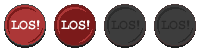
<style>
.page{position:relative;width:200px;height:50px;background:#ffffff}
.page>*{position:absolute;margin:0}
.t1{font:13.9px "CourierNewPS-BoldMT";color:#ffffff}
.t2{font:13.9px "CourierNewPS-BoldMT";letter-spacing:-0.14em;color:#ffffff}
.t3{font:13.9px "CourierNewPS-BoldMT";letter-spacing:-0.16em;color:#ffffff}
.t4{font:13.9px "CourierNewPS-BoldMT";color:#282828}
.t5{font:13.9px "CourierNewPS-BoldMT";letter-spacing:-0.14em;color:#282828}
.t6{font:13.9px "CourierNewPS-BoldMT";letter-spacing:-0.16em;color:#282828}
</style>
<div class="page">
<p class="t1" style="left:11px;top:20px;width:29px;height:10px">LO<span class="t2">S</span><span class="t3">!</span></p>
<p class="t1" style="left:61px;top:20px;width:29px;height:10px">LO<span class="t2">S</span><span class="t3">!</span></p>
<p class="t4" style="left:111px;top:20px;width:29px;height:10px">LO<span class="t5">S</span><span class="t6">!</span></p>
<p class="t4" style="left:161px;top:20px;width:29px;height:10px">LO<span class="t5">S</span><span class="t6">!</span></p>
</div>
